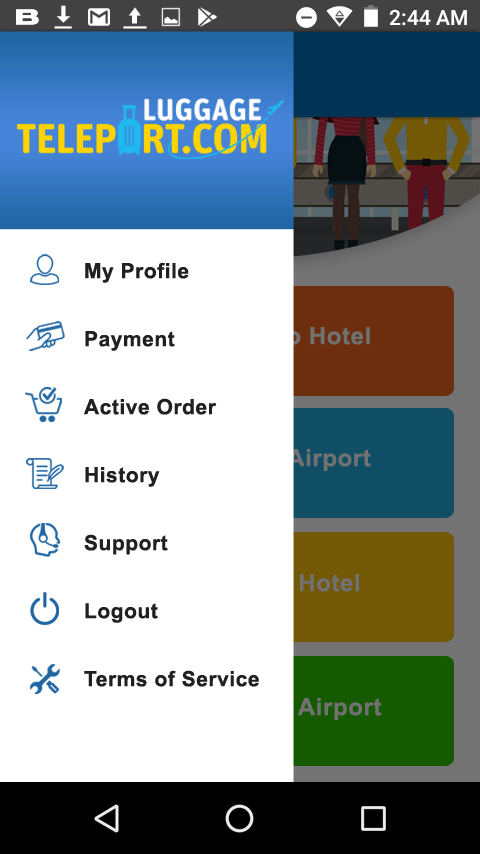
<style>
.page{position:relative;width:480px;height:854px;background:#ffffff}
.page>*{position:absolute;margin:0}
.t1{font:21px/68px "Arial-BoldMT";letter-spacing:0.025em;color:#202020}
</style>
<div class="page">
<p class="t1" style="left:84px;top:262px;width:175px;height:425px">My Profile<br>Payment<br>Active Order<br>History<br>Support<br>Logout<br>Terms of Service</p>
</div>
